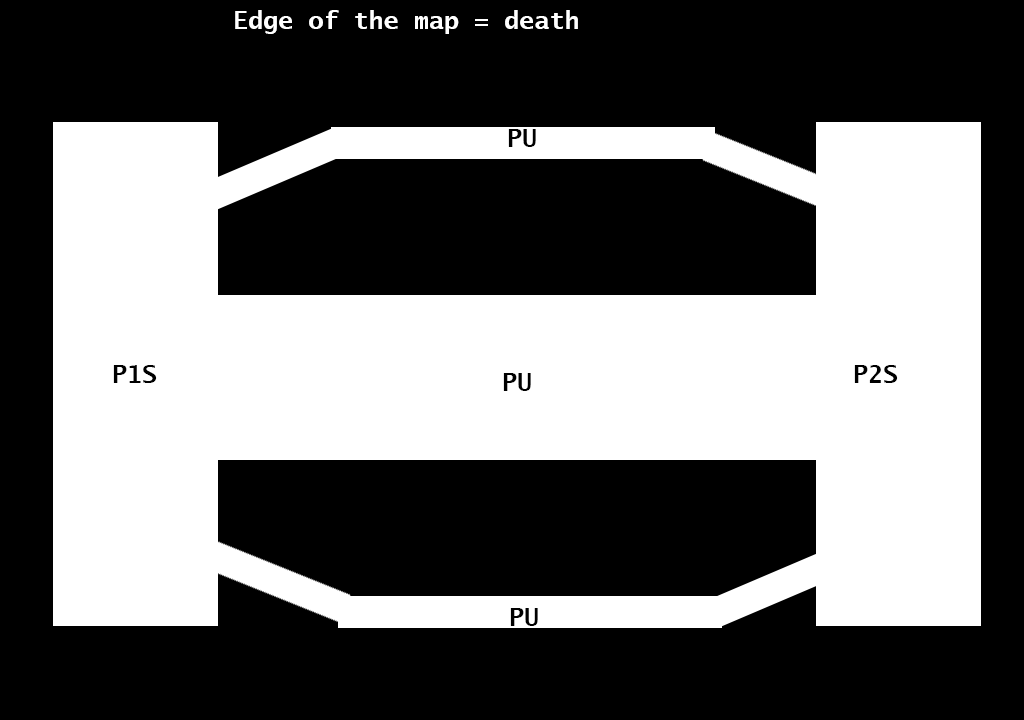
<style>
.page{position:relative;width:1024px;height:720px;background:#000000}
.page>*{position:absolute;margin:0}
.t1{font:25px "LucidaSans-TypewriterBold";color:#ffffff}
.t2{font:25px "LucidaSans-TypewriterBold";color:#000000}
</style>
<div class="page">
<p class="t1" style="left:235px;top:10px;width:343px;height:24px">Edge of the map = death</p>
<p class="t2" style="left:508px;top:129px;width:28px;height:18px">PU</p>
<p class="t2" style="left:113px;top:365px;width:44px;height:18px">P1S</p>
<p class="t2" style="left:854px;top:365px;width:44px;height:18px">P2S</p>
<p class="t2" style="left:503px;top:373px;width:28px;height:18px">PU</p>
<p class="t2" style="left:510px;top:608px;width:28px;height:18px">PU</p>
</div>
